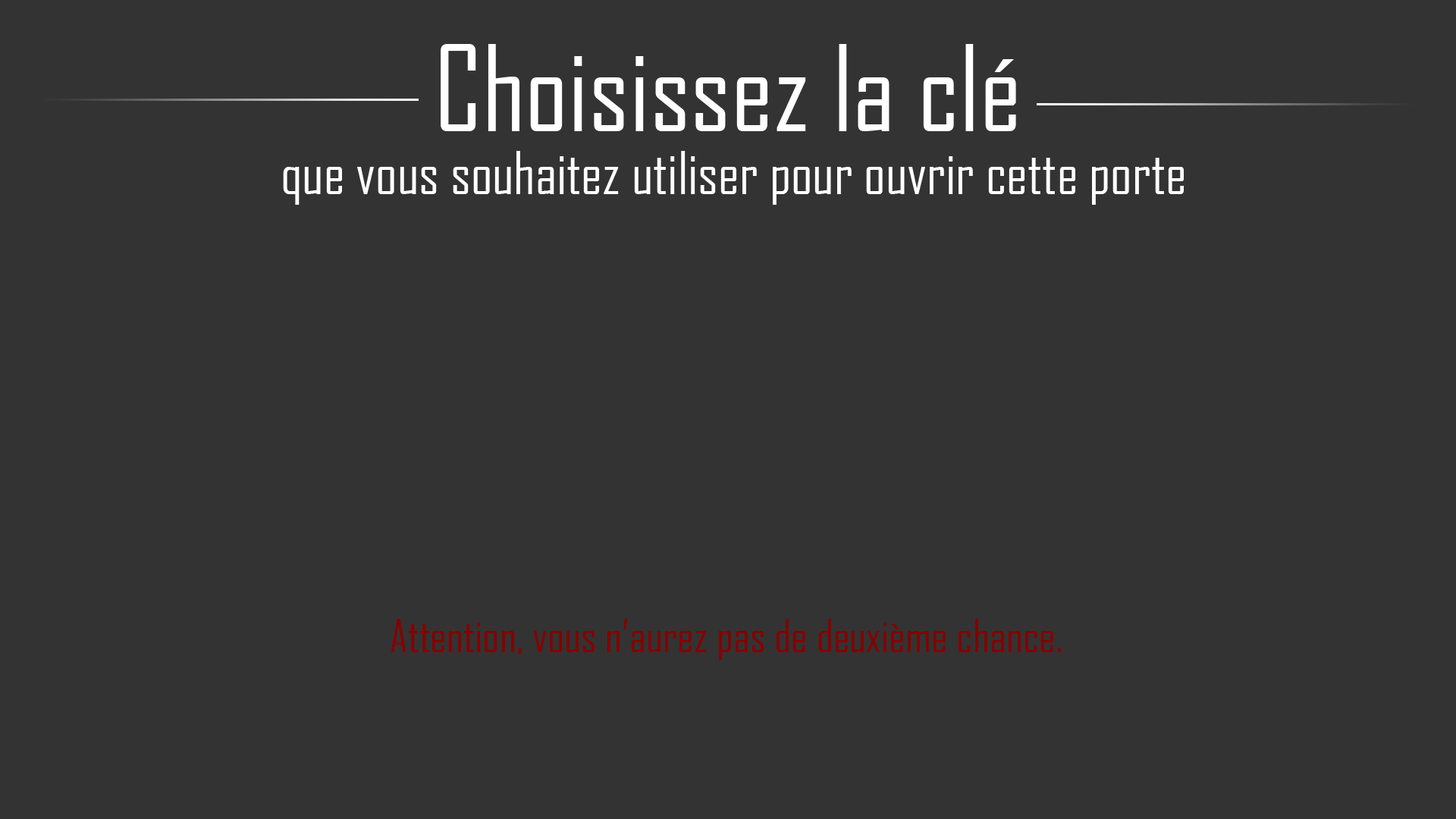
<style>
.page{position:relative;width:1456px;height:819px;background:#333333}
.page>*{position:absolute;margin:0}
.t1{font:56.9px/63.2px "AgencyFB-Reg";color:#ffffff}
.t2{font:113.7px/63.2px "AgencyFB-Reg";color:#ffffff}
.t3{font:44.2px "AgencyFB-Reg";color:#860000}
</style>
<div class="page">
<p class="t1" style="left:283px;top:44px;width:901px;height:161px;text-align:center"><span class="t2">Choisissez la clé<br></span> que vous souhaitez utiliser pour ouvrir cette porte</p>
<p class="t3" style="left:391px;top:619px;width:670px;height:41px">Attention, vous n’aurez pas de deuxième chance.</p>
</div>
